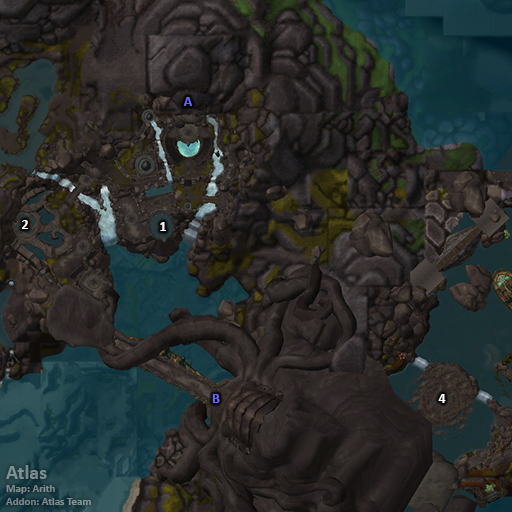
<style>
.page{position:relative;width:512px;height:512px}
.page>*{position:absolute;margin:0}
.t1{font:14px "Calibri-Bold";color:#6666ff}
.t2{font:14px "Calibri-Bold";color:#ffffff}
.t3{font:11px "Calibri-Bold";color:#7e8d90}
.t4{font:20px "Calibri-Bold";color:#7e8d90}
</style>
<div class="page">
<p class="t1" style="left:183px;top:97px;width:9px;height:9px">A</p>
<p class="t2" style="left:22px;top:220px;width:7px;height:9px">2</p>
<p class="t2" style="left:160px;top:222px;width:6px;height:9px">1</p>
<p class="t1" style="left:212px;top:394px;width:8px;height:9px">B</p>
<p class="t2" style="left:438px;top:394px;width:8px;height:9px">4</p>
<p class="t3" style="left:6px;top:465px;width:85px;height:40px"><span class="t4">Atlas<br></span>Map: Arith<br>Addon: Atlas Team</p>
</div>
